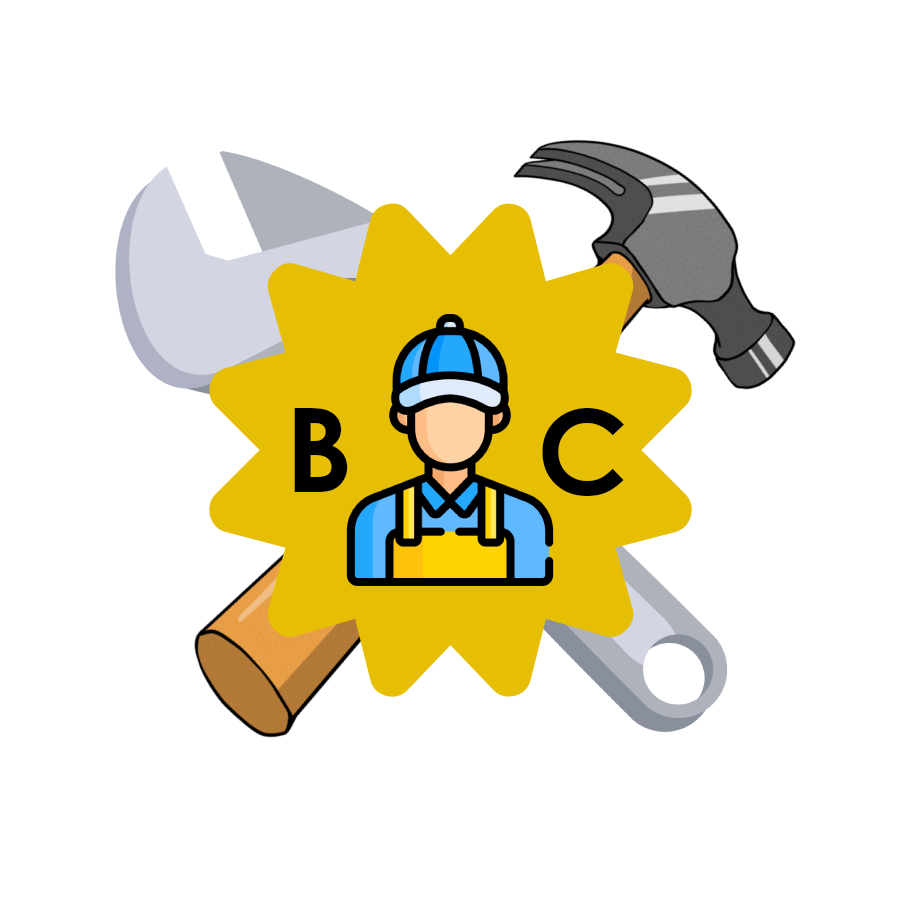
<style>
.page{position:relative;width:900px;height:900px;background:#ffffff}
.page>*{position:absolute;margin:0}
.t1{font:117px "CenturyGothic-Bold";color:#000000}
</style>
<div class="page">
<p class="t1" style="left:294px;top:408px;width:54px;height:84px">В</p>
<p class="t1" style="left:542px;top:408px;width:82px;height:88px">С</p>
</div>
